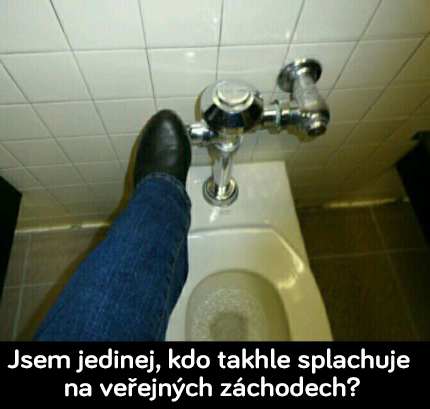
<style>
.page{position:relative;width:430px;height:409px}
.page>*{position:absolute;margin:0}
.t1{font:27.3px/28px "Bariol-Bold";color:#fefefe;scale:1.1 1}
</style>
<div class="page">
<p class="t1" style="left:7px;top:348px;width:403px;height:54px;text-align:center">Jsem jedinej, kdo takhle splachuje <br>na veřejných záchodech?</p>
</div>
